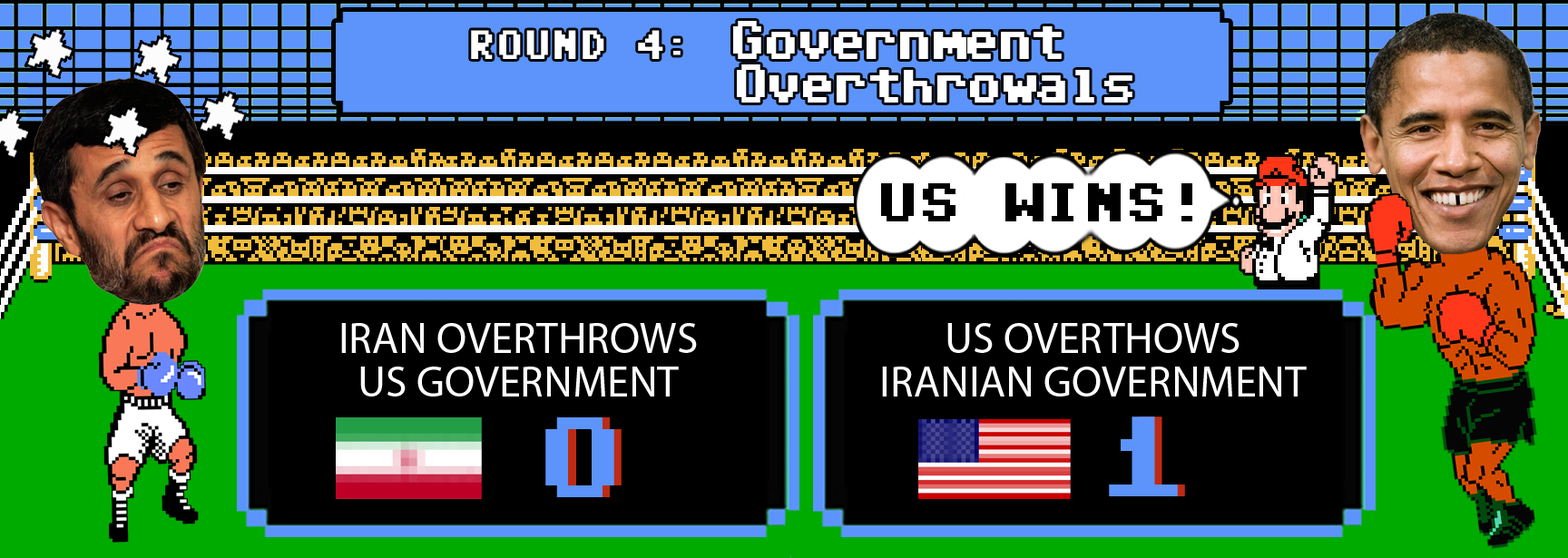
<style>
.page{position:relative;width:1568px;height:558px;background:#000000}
.page>*{position:absolute;margin:0}
.t1{font:43.6px/43.6px "Adore64";letter-spacing:-0.1em;color:#ffffff;scale:0.85 1}
.t2{font:32.7px/43.6px "Adore64";color:#ffffff;scale:0.85 1}
.t3{font:43.6px "Adore64";letter-spacing:-0.05em;color:#000000}
.t4{font:43.6px/43.6px "MyriadPro-Regular";color:#ffffff}
.t5{font:90.8px "Adore64";color:#5c94fc}
</style>
<div class="page">
<p class="t1" style="left:471px;top:21px;width:661px;height:82px;text-align:center"><span class="t2">ROUND 4: </span>Government <br>         Overthrowals</p>
<p class="t3" style="left:881px;top:183px;width:311px;height:38px">US WINS!</p>
<p class="t4" style="left:341px;top:323px;width:356px;height:74px;text-align:center">IRAN OVERTHROWS<br>US GOVERNMENT</p>
<p class="t4" style="left:882px;top:323px;width:425px;height:74px;text-align:center">US OVERTHOWS<br>IRANIAN GOVERNMENT</p>
<p class="t5" style="left:545px;top:417px;width:69px;height:80px">0</p>
<p class="t5" style="left:1109px;top:416px;width:69px;height:80px">1</p>
</div>
